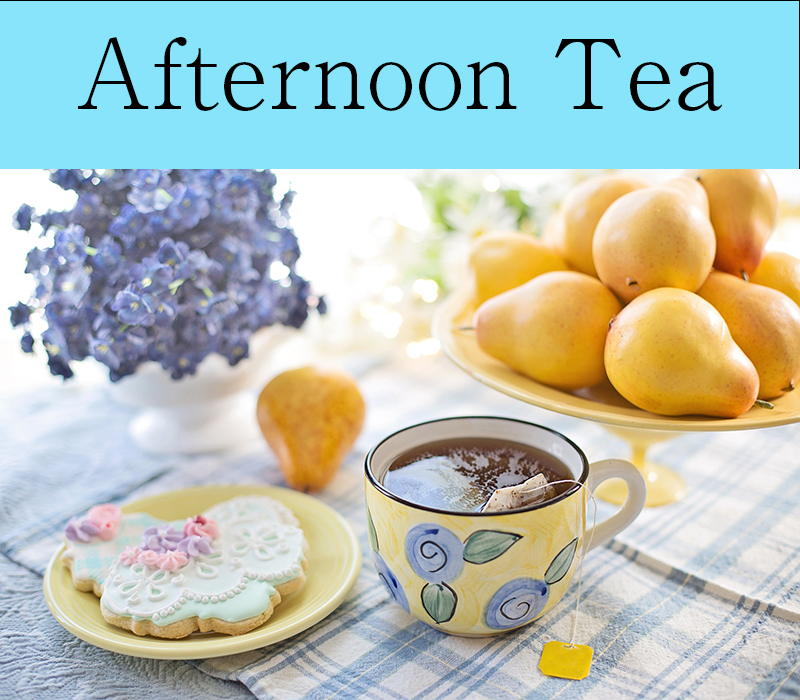
<style>
.page{position:relative;width:800px;height:700px;background:#87e4fb}
.page>*{position:absolute;margin:0}
.t1{font:95.8px "RyuminPr6N-Light";letter-spacing:0.01em;color:#000000}
</style>
<div class="page">
<p class="t1" style="left:78px;top:37px;width:645px;height:74px">Afternoon Tea</p>
</div>
